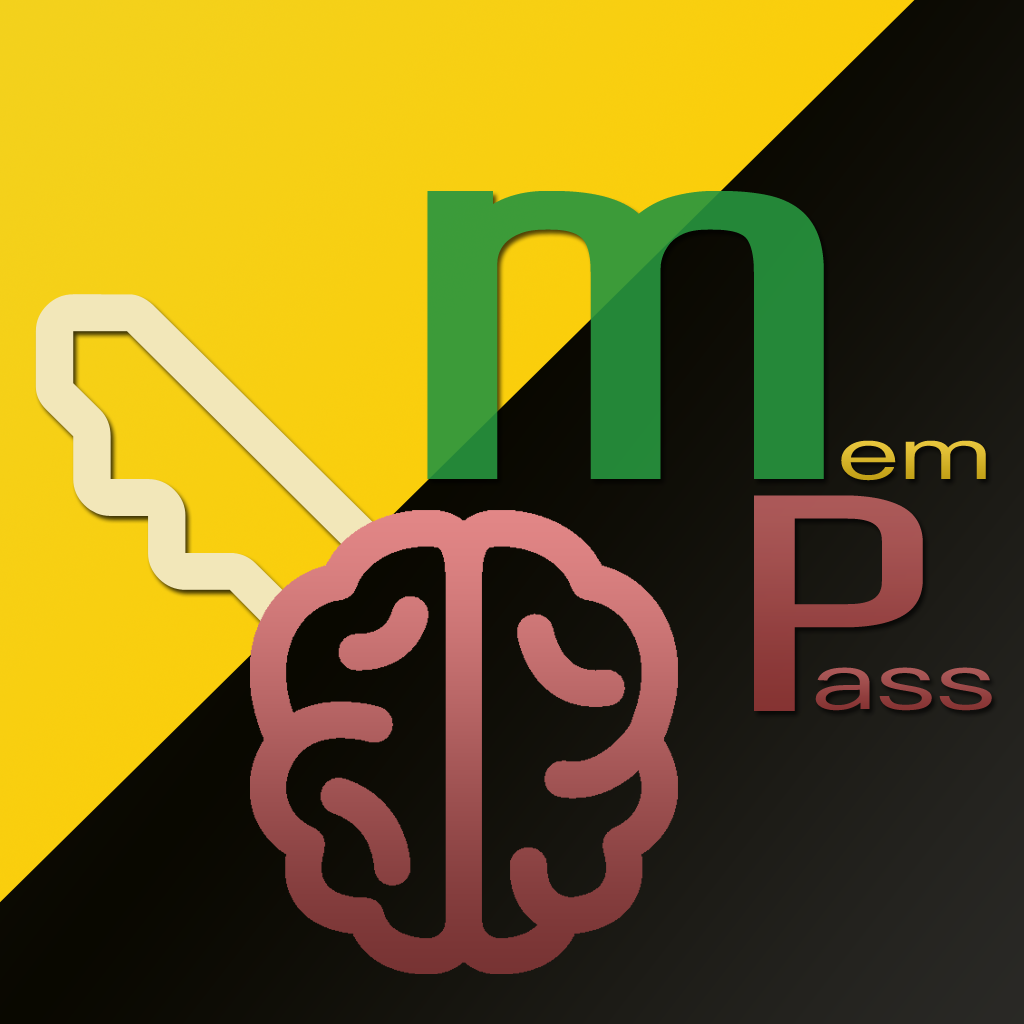
<style>
.page{position:relative;width:1024px;height:1024px}
.page>*{position:absolute;margin:0}
.t1{font:576px "Share-TechMono";letter-spacing:0.09em;scale:1.52 1}
.t2{font:72px "PingFangSC-Regular";color:#d8b52d;scale:1.52 1}
.t3{font:308px "Share-TechMono";letter-spacing:0.09em;color:#9d4b4a;scale:1.52 1}
.t4{font:77.7px "PingFangSC-Regular";color:#994746;scale:1.51 1}
</style>
<div class="page">
<p class="t1" style="left:427px;top:191px;width:397px;height:288px">m</p>
<p class="t2" style="left:841px;top:440px;width:145px;height:41px">em</p>
<p class="t3" style="left:754px;top:495px;width:169px;height:216px">P</p>
<p class="t4" style="left:815px;top:667px;width:177px;height:44px">ass</p>
</div>
